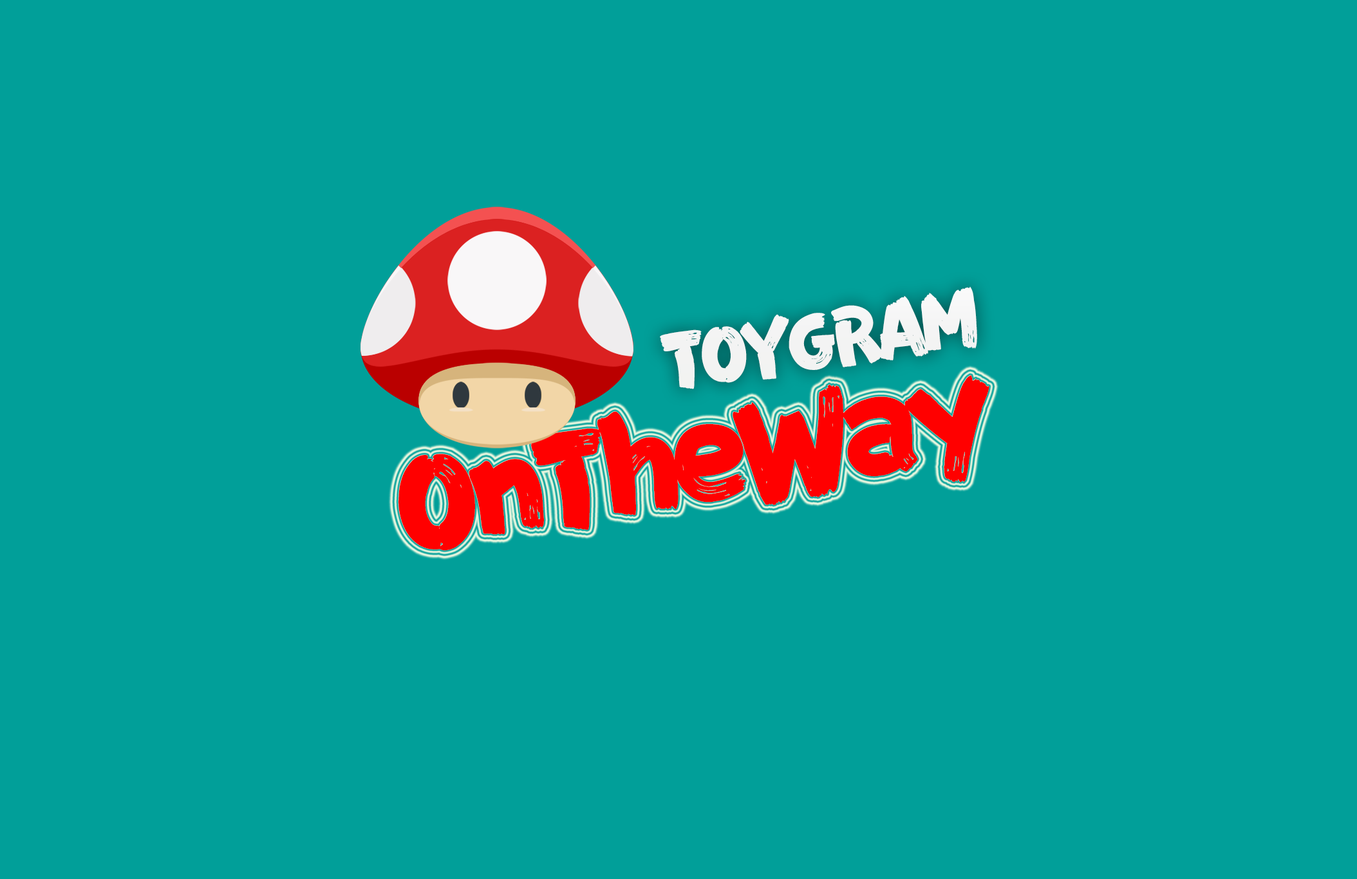
<style>
.page{position:relative;width:1357px;height:879px;background:#019f99}
.page>*{position:absolute;margin:0}
.t1{font:72.5px "FZFENSTXJW--GB1-0";letter-spacing:-0.08em;color:#ffffff}
.t2{font:124.8px "FZFENSTXJW--GB1-0";letter-spacing:-0.08em;color:#ff0000}
</style>
<div class="page">
<p class="t1" style="left:660px;top:286px;width:317px;height:103px;rotate:-9deg">TOYGRAM</p>
<p class="t2" style="left:398px;top:375px;width:591px;height:176px;rotate:-9deg">OnTheWay</p>
</div>
